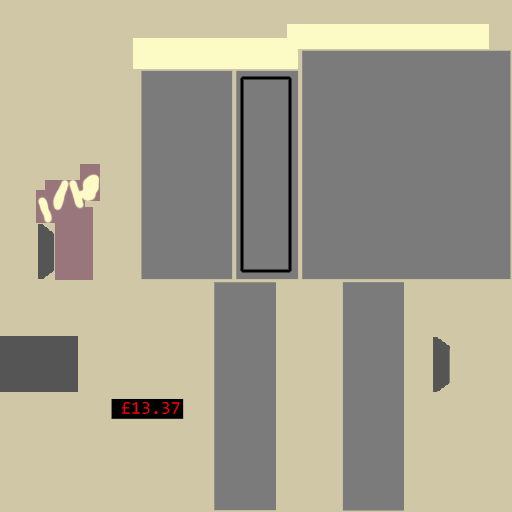
<style>
.page{position:relative;width:512px;height:512px;background:#cfc7a6}
.page>*{position:absolute;margin:0}
.t1{font:18px "Consolas";color:#ff0000}
</style>
<div class="page">
<p class="t1" style="left:122px;top:402px;width:58px;height:12px">£13.37</p>
</div>
